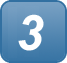
<style>
.page{position:relative;width:67px;height:63px}
.page>*{position:absolute;margin:0}
.t1{font:49px "Arial-BoldItalicMT";color:#ffffff}
</style>
<div class="page">
<p class="t1" style="left:18px;top:14px;width:26px;height:37px">3</p>
</div>
